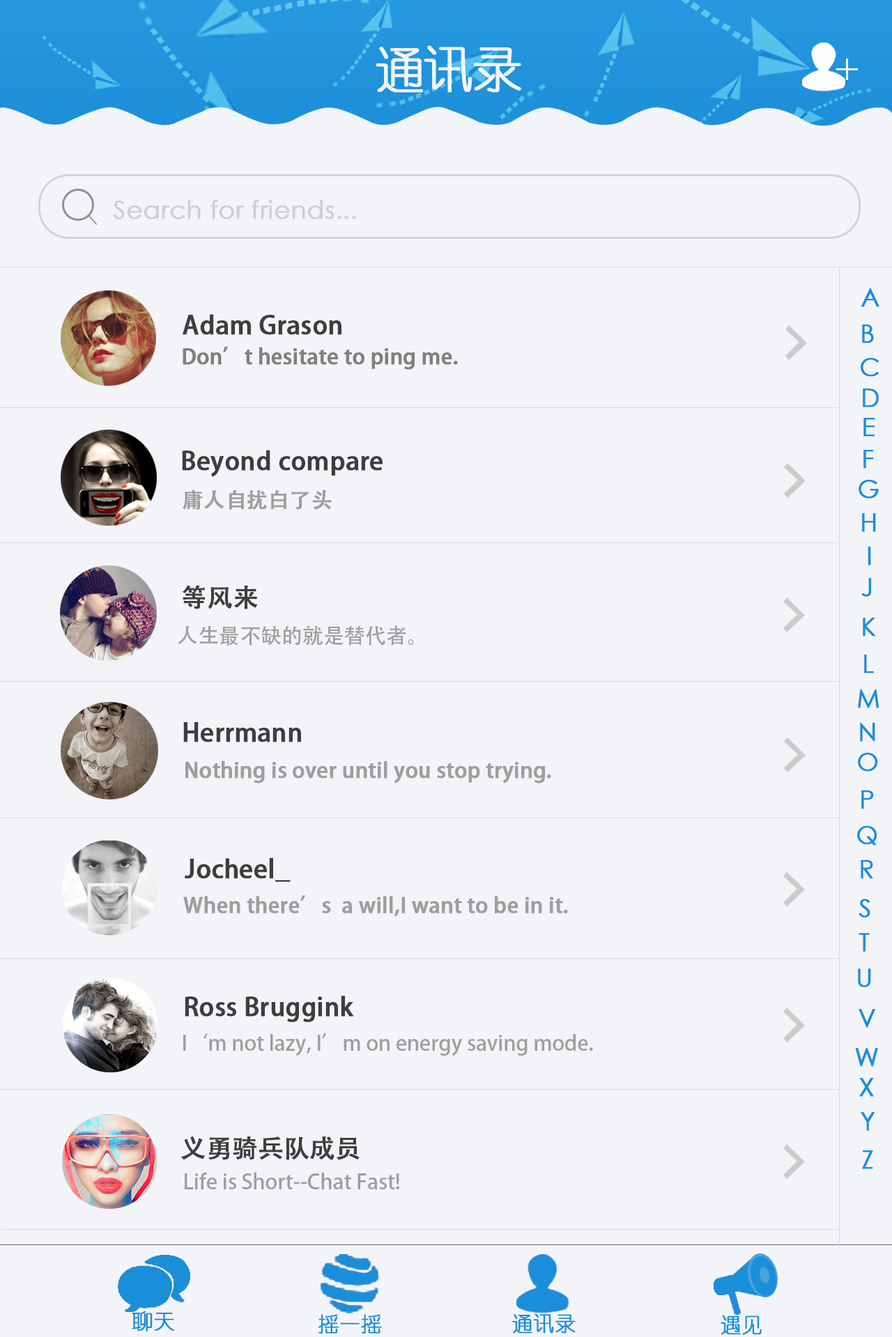
<style>
.page{position:relative;width:892px;height:1337px;background:#f2f4f7}
.page>*{position:absolute;margin:0}
.t1{font:50.2px "YouYuan";letter-spacing:-0.06em;color:#f2f4f7;font-weight:bold}
.t2{font:25.1px "CenturyGothic";color:#cfcfcf;font-weight:bold}
.t3{font:25.1px "CenturyGothic";color:#1b8ed9;font-weight:bold}
.t4{font:25.1px "AdobeHeitiStd-Regular";color:#3e3e3e;font-weight:bold}
.t5{font:20.9px "AdobeHeitiStd-Regular";color:#808080;font-weight:bold}
.t6{font:20.9px "AdobeHeitiStd-Regular";color:#9e9e9e;font-weight:bold}
.t7{font:20.9px "AdobeHeitiStd-Regular";color:#9e9e9e}
.t8{font:20.9px "YouYuan";color:#1b8ed9;font-weight:bold}
</style>
<div class="page">
<p class="t1" style="left:375px;top:45px;width:146px;height:48px">通讯录</p>
<p class="t2" style="left:113px;top:200px;width:243px;height:19px">Search for friends...</p>
<p class="t3" style="left:860px;top:288px;width:19px;height:19px">A</p>
<p class="t4" style="left:182px;top:314px;width:159px;height:21px">Adam Grason</p>
<p class="t3" style="left:862px;top:325px;width:11px;height:18px">B</p>
<p class="t5" style="left:182px;top:346px;width:276px;height:24px">Don’t hesitate to ping me.</p>
<p class="t3" style="left:860px;top:358px;width:19px;height:19px">C</p>
<p class="t3" style="left:862px;top:389px;width:16px;height:18px">D</p>
<p class="t3" style="left:863px;top:418px;width:11px;height:19px">E</p>
<p class="t4" style="left:182px;top:450px;width:200px;height:27px">Beyond compare</p>
<p class="t3" style="left:863px;top:450px;width:10px;height:19px">F</p>
<p class="t3" style="left:858px;top:480px;width:20px;height:19px">G</p>
<p class="t6" style="left:182px;top:490px;width:150px;height:20px">庸人自扰白了头</p>
<p class="t3" style="left:862px;top:513px;width:14px;height:19px">H</p>
<p class="t3" style="left:867px;top:547px;width:4px;height:19px">I</p>
<p class="t3" style="left:861px;top:578px;width:10px;height:19px">J</p>
<p class="t4" style="left:182px;top:585px;width:76px;height:24px">等风来</p>
<p class="t3" style="left:862px;top:618px;width:14px;height:19px">K</p>
<p class="t7" style="left:178px;top:626px;width:235px;height:20px">人生最不缺的就是替代者。</p>
<p class="t3" style="left:864px;top:655px;width:9px;height:19px">L</p>
<p class="t3" style="left:857px;top:690px;width:21px;height:18px">M</p>
<p class="t4" style="left:183px;top:722px;width:118px;height:21px">Herrmann</p>
<p class="t3" style="left:860px;top:723px;width:15px;height:19px">N</p>
<p class="t6" style="left:185px;top:761px;width:366px;height:23px">Nothing is over until you stop trying.</p>
<p class="t3" style="left:857px;top:753px;width:21px;height:19px">O</p>
<p class="t3" style="left:861px;top:791px;width:12px;height:18px">P</p>
<p class="t3" style="left:857px;top:826px;width:20px;height:20px">Q</p>
<p class="t4" style="left:185px;top:858px;width:105px;height:25px">Jocheel_</p>
<p class="t3" style="left:860px;top:860px;width:13px;height:19px">R</p>
<p class="t6" style="left:183px;top:895px;width:385px;height:22px">When there’s  a will,I want to be in it.</p>
<p class="t3" style="left:858px;top:899px;width:12px;height:19px">S</p>
<p class="t3" style="left:858px;top:933px;width:11px;height:19px">T</p>
<p class="t3" style="left:857px;top:969px;width:14px;height:19px">U</p>
<p class="t4" style="left:185px;top:996px;width:169px;height:27px">Ross Bruggink</p>
<p class="t3" style="left:858px;top:1009px;width:17px;height:19px">V</p>
<p class="t7" style="left:183px;top:1033px;width:410px;height:23px">I‘m not lazy, I’m on energy saving mode.</p>
<p class="t3" style="left:855px;top:1048px;width:23px;height:19px">W</p>
<p class="t3" style="left:859px;top:1078px;width:14px;height:19px">X</p>
<p class="t3" style="left:860px;top:1112px;width:15px;height:19px">Y</p>
<p class="t4" style="left:181px;top:1137px;width:178px;height:23px">义勇骑兵队成员</p>
<p class="t3" style="left:862px;top:1151px;width:11px;height:19px">Z</p>
<p class="t7" style="left:185px;top:1172px;width:214px;height:18px">Life is Short--Chat Fast!</p>
<p class="t8" style="left:132px;top:1312px;width:42px;height:20px">聊天</p>
<p class="t8" style="left:512px;top:1314px;width:63px;height:20px">通讯录</p>
<p class="t8" style="left:318px;top:1314px;width:64px;height:20px">摇一摇</p>
<p class="t8" style="left:720px;top:1315px;width:41px;height:20px">遇见</p>
</div>
